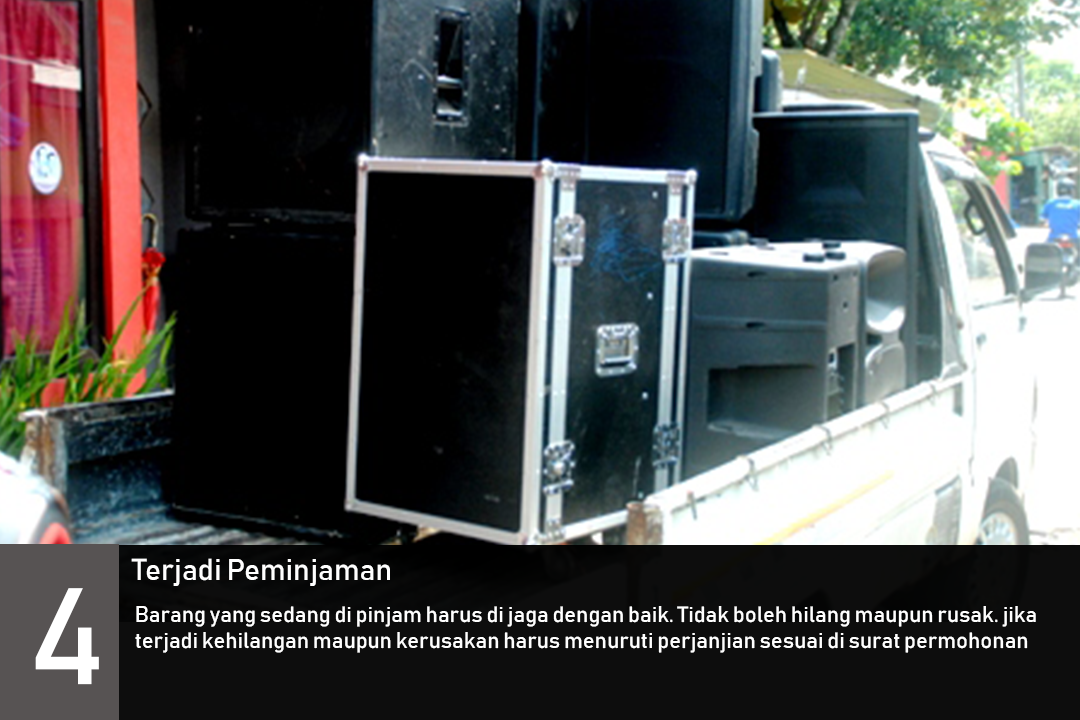
<style>
.page{position:relative;width:1080px;height:720px}
.page>*{position:absolute;margin:0}
.t1{font:30px "Bahnschrift";color:#ffffff}
.t2{font:135.3px "Bahnschrift";color:#ffffff}
.t3{font:22px "Bahnschrift";color:#ffffff}
</style>
<div class="page">
<p class="t1" style="left:131px;top:558px;width:259px;height:28px">Terjadi Peminjaman</p>
<p class="t2" style="left:35px;top:588px;width:64px;height:97px">4</p>
<p class="t3" style="left:135px;top:606px;width:901px;height:47px">Barang yang sedang di pinjam harus di jaga dengan baik. Tidak boleh hilang maupun rusak. jika terjadi kehilangan maupun kerusakan harus menuruti perjanjian sesuai di surat permohonan</p>
</div>
